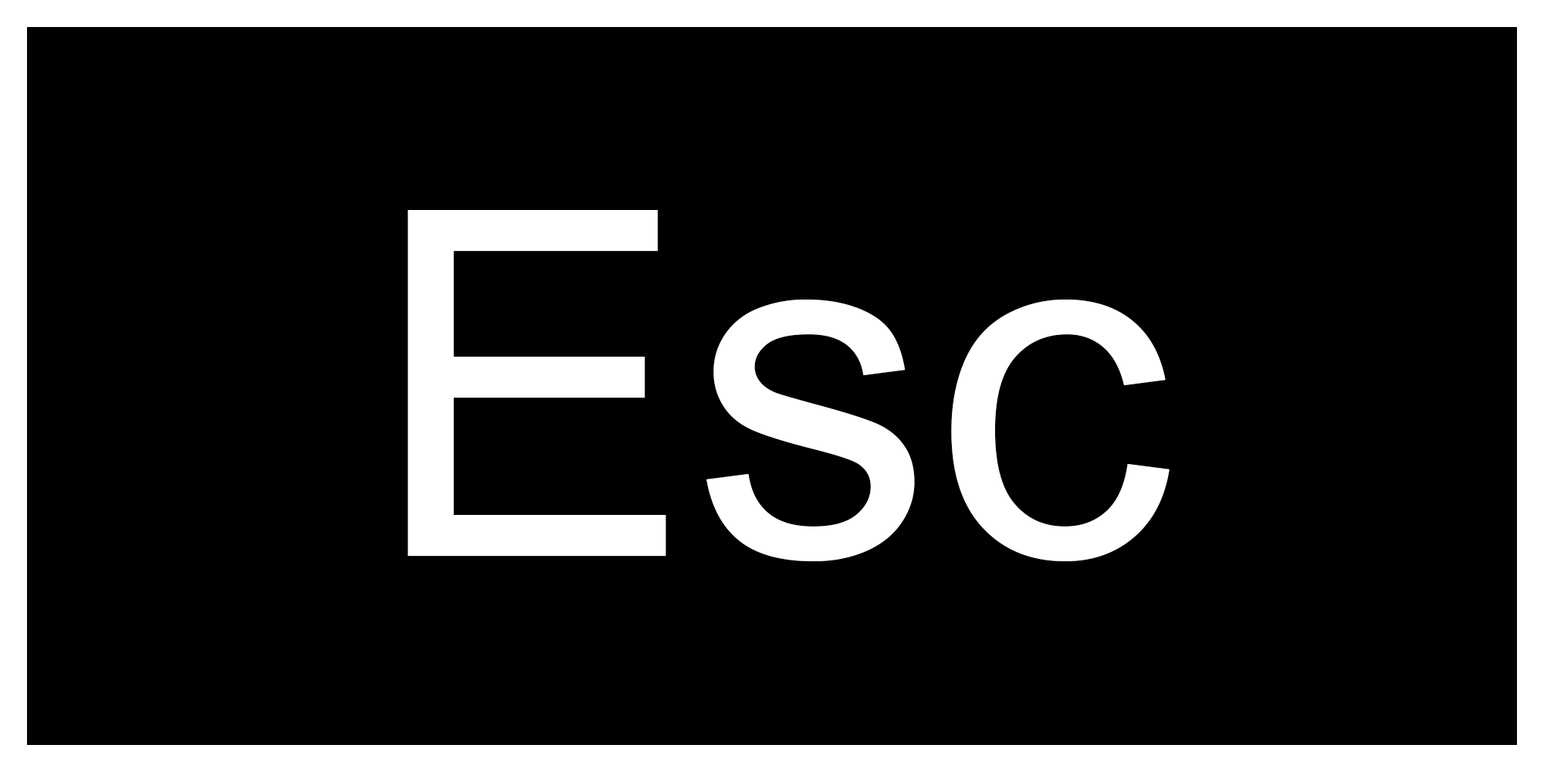
<style>
.page{position:relative;width:1544px;height:772px;background:#000000}
.page>*{position:absolute;margin:0}
.t1{font:482.6px "ArialMT";color:#ffffff}
</style>
<div class="page">
<p class="t1" style="left:408px;top:210px;width:762px;height:351px">Esc</p>
</div>
